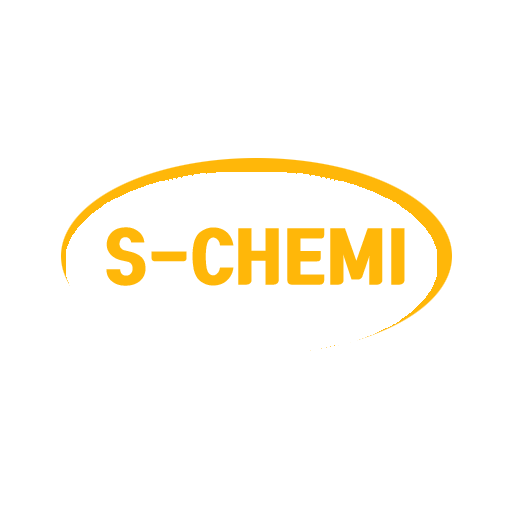
<style>
.page{position:relative;width:512px;height:512px;background:#ffffff}
.page>*{position:absolute;margin:0}
.t1{font:65px "TmonMonsoriBlack";color:#ffb709}
</style>
<div class="page">
<p class="t1" style="left:106px;top:227px;width:299px;height:59px">S-CHEMI</p>
</div>
